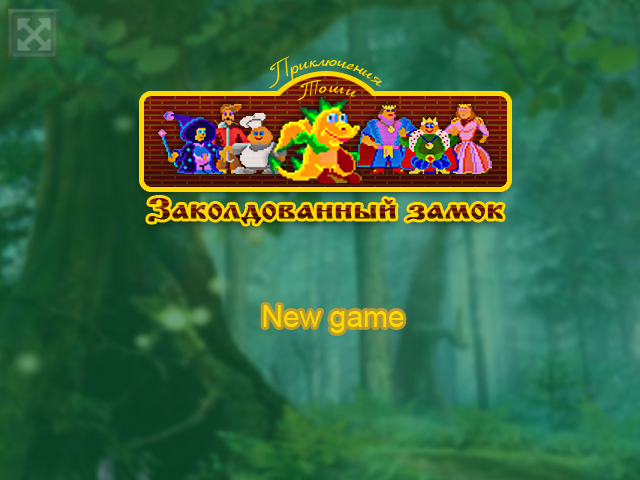
<style>
.page{position:relative;width:640px;height:480px}
.page>*{position:absolute;margin:0}
.t1{font:30px "CyrillicRibbon";color:#ffd801}
.t2{font:24px "CyrillicRibbon";color:#ffd801}
.t3{font:30px "CyrillicRibbon";letter-spacing:0.075em;color:#ffd801}
.t4{font:18px "CyrillicRibbon";letter-spacing:0.075em;color:#ffd801}
.t5{font:30px "CyrillicOld";font-weight:bold;scale:1.22 1}
.t6{font:30px "ArialMT";color:#ffd801}
</style>
<div class="page">
<p class="t1" style="left:269px;top:56px;width:113px;height:33px"><span class="t2">П</span>риключения</p>
<p class="t3" style="left:297px;top:80px;width:59px;height:21px"><span class="t4">Т</span>ошu</p>
<p class="t5" style="left:148px;top:198px;width:355px;height:26px">Заколдованный замок</p>
<p class="t6" style="left:263px;top:305px;width:141px;height:28px">New game</p>
</div>
